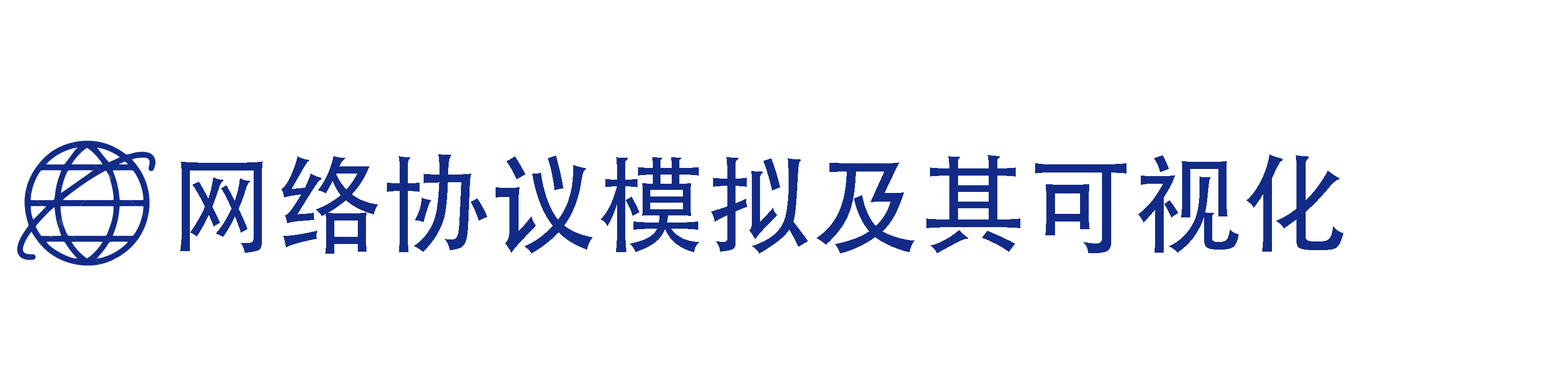
<style>
.page{position:relative;width:1568px;height:392px;background:#ffffff}
.page>*{position:absolute;margin:0}
.t1{font:107.4px "AdobeHeitiStd-Regular";color:#122b88}
</style>
<div class="page">
<p class="t1" style="left:180px;top:154px;width:1163px;height:100px">网络协议模拟及其可视化</p>
</div>
